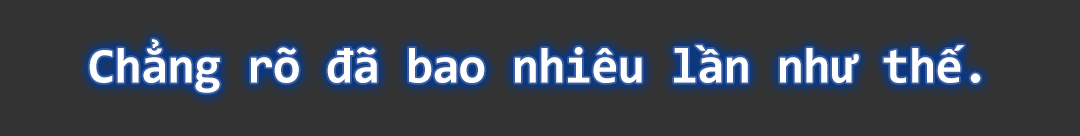
<style>
.page{position:relative;width:1080px;height:136px;background:#333333}
.page>*{position:absolute;margin:0}
.t1{font:50px "Consolas-Bold";letter-spacing:-0.02em;color:#fefefe}
</style>
<div class="page">
<p class="t1" style="left:89px;top:39px;width:892px;height:54px">Chẳng rõ đã bao nhiêu lần như thế.</p>
</div>
